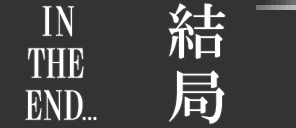
<style>
.page{position:relative;width:296px;height:128px;background:#333333}
.page>*{position:absolute;margin:0}
.t1{font:40px/42px "HGMinchoB";color:#ffffff}
.t2{font:20px/42px "HGMinchoB";letter-spacing:-0.1em;color:#ffffff}
.t3{font:60px "HGMinchoB";letter-spacing:-0.2em;color:#ffffff}
</style>
<div class="page">
<p class="t1" style="left:25px;top:6px;width:72px;height:115px;text-align:center">IN<br>THE<br> END<span class="t2">...</span></p>
<p class="t3" style="left:168px;top:3px;width:57px;height:121px">結 局</p>
</div>
